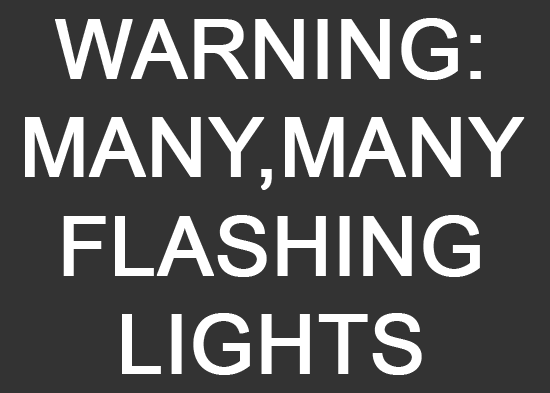
<style>
.page{position:relative;width:550px;height:393px;background:#333333}
.page>*{position:absolute;margin:0}
.t1{font:82px "ArialMT";color:#ffffff;font-weight:bold}
</style>
<div class="page">
<p class="t1" style="left:25px;top:18px;width:500px;height:357px;text-align:center">WARNING:<br>MANY,MANY<br>FLASHING<br>LIGHTS</p>
</div>
